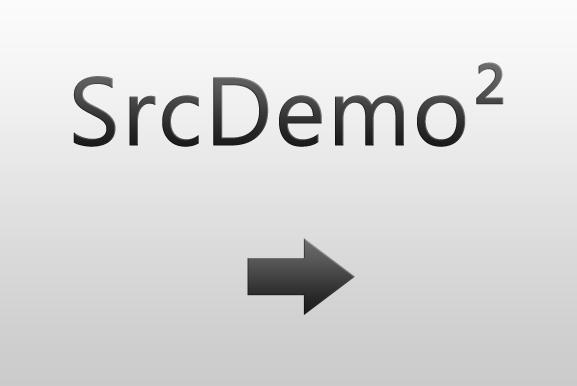
<style>
.page{position:relative;width:577px;height:386px}
.page>*{position:absolute;margin:0}
.t1{font:96px "SegoeUI";font-weight:bold}
</style>
<div class="page">
<p class="t1" style="left:73px;top:62px;width:431px;height:85px">SrcDemo²</p>
</div>
